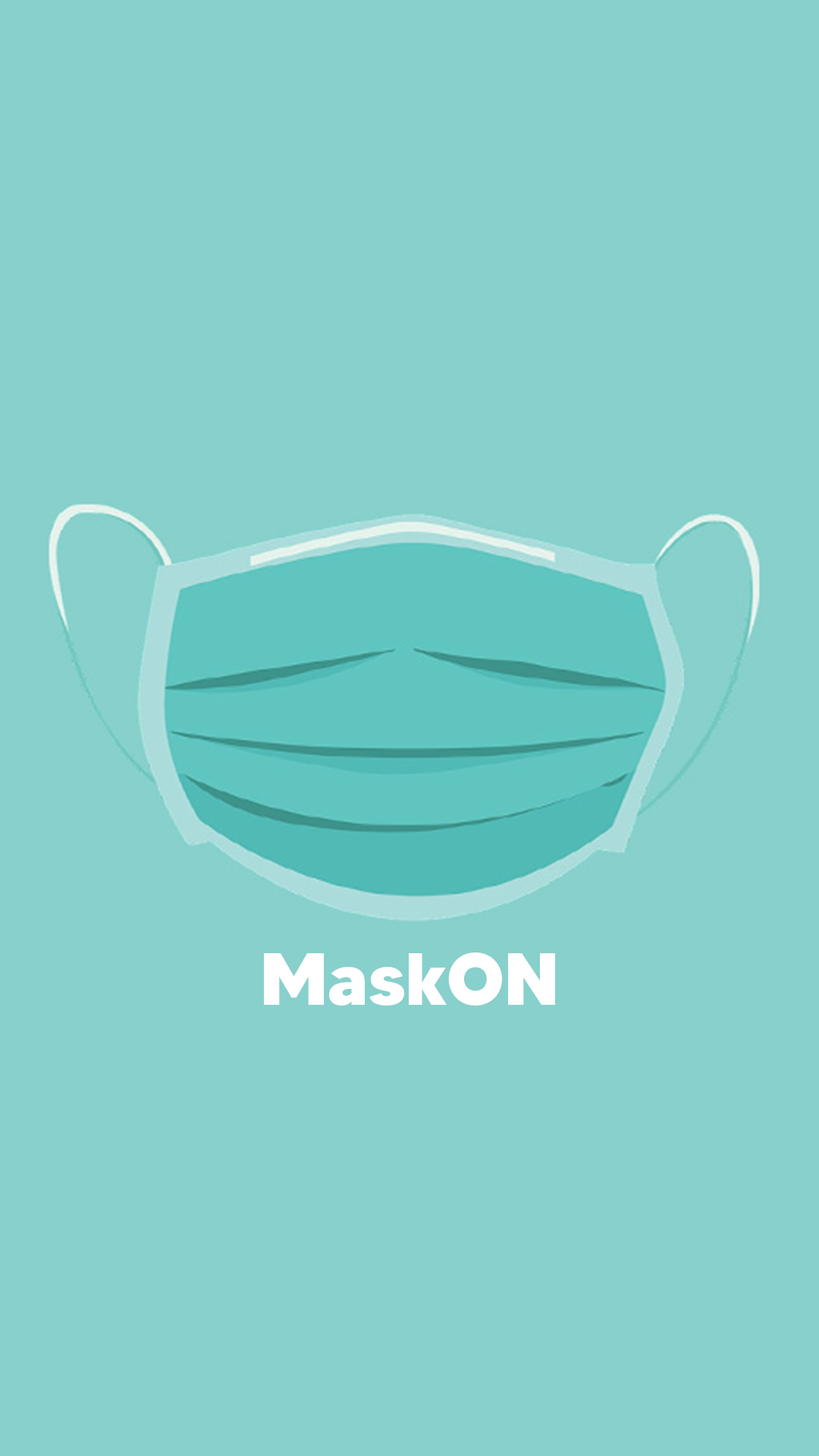
<style>
.page{position:relative;width:819px;height:1456px;background:#88d0cc}
.page>*{position:absolute;margin:0}
.t1{font:73.8px "MADETOMMY-ExtraBold";color:#ffffff}
</style>
<div class="page">
<p class="t1" style="left:264px;top:952px;width:291px;height:54px">MaskON</p>
</div>
